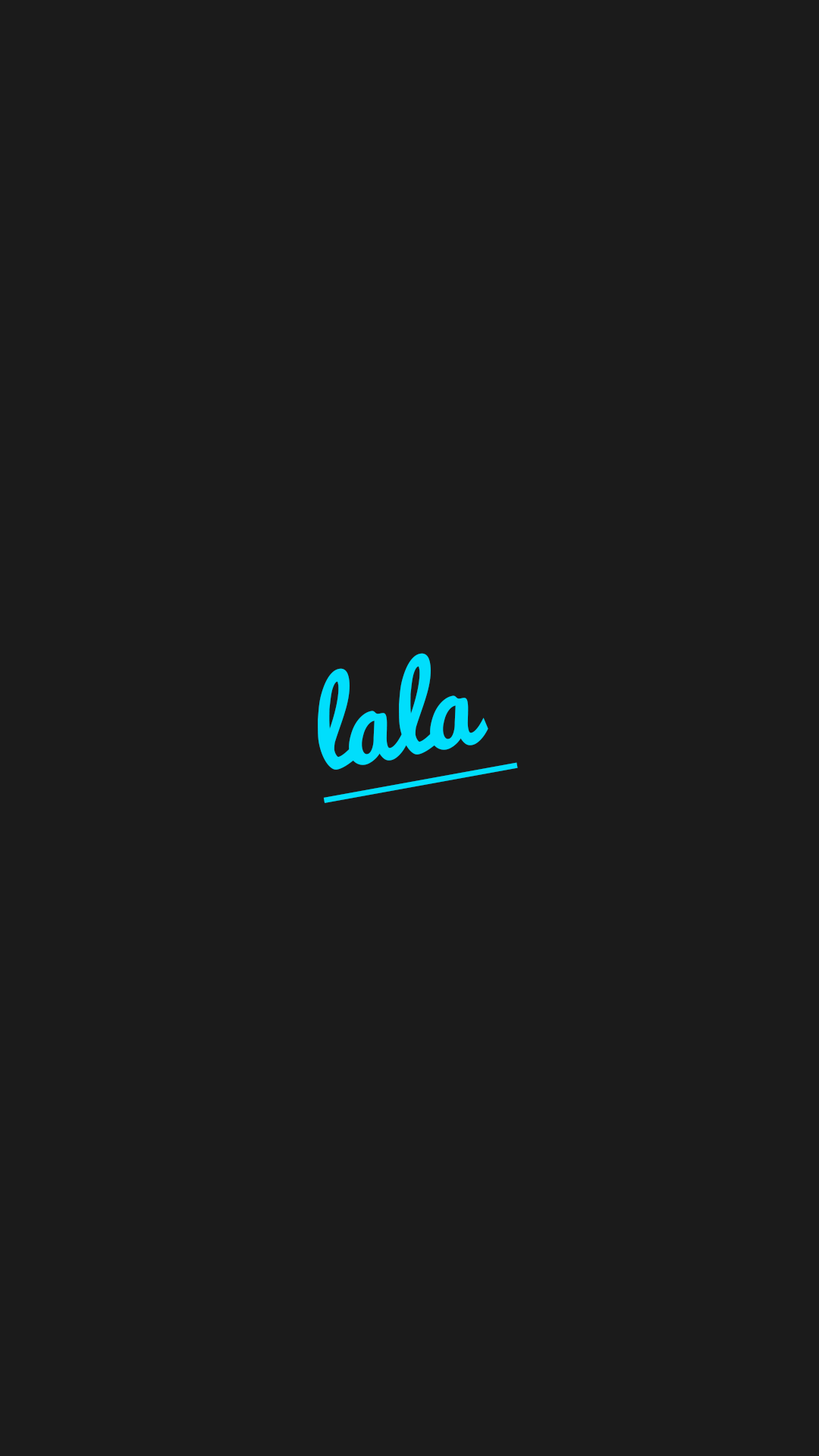
<style>
.page{position:relative;width:819px;height:1456px;background:#1b1b1b}
.page>*{position:absolute;margin:0}
.t1{font:106.6px "Pacifico";letter-spacing:0.02em;color:#00defc;text-decoration:underline}
</style>
<div class="page">
<p class="t1" style="left:318px;top:653px;width:200px;height:150px;rotate:-10deg">lala</p>
</div>
